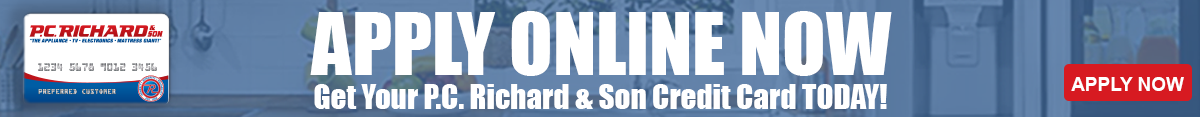
<style>
.page{position:relative;width:1200px;height:117px;background:#ffffff}
.page>*{position:absolute;margin:0}
.t1{font:79.7px "Impact";color:#ffffff}
.t2{font:19px "Arial-BoldMT";color:#ffffff}
.t3{font:31.1px "Impact";color:#ffffff}
</style>
<div class="page">
<p class="t1" style="left:310px;top:11px;width:582px;height:65px">APPLY ONLINE NOW</p>
<p class="t2" style="left:1071px;top:77px;width:113px;height:14px">APPLY NOW</p>
<p class="t3" style="left:314px;top:84px;width:573px;height:25px">Get Your P.C. Richard &amp; Son Credit Card TODAY!</p>
</div>
